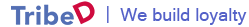
<style>
.page{position:relative;width:249px;height:27px;background:#ffffff}
.page>*{position:absolute;margin:0}
.t1{font:18px "MicrosoftSansSerif";color:#5461c8}
</style>
<div class="page">
<p class="t1" style="left:107px;top:6px;width:2px;height:17px">|</p>
<p class="t1" style="left:120px;top:8px;width:127px;height:17px">We build loyalty</p>
</div>
